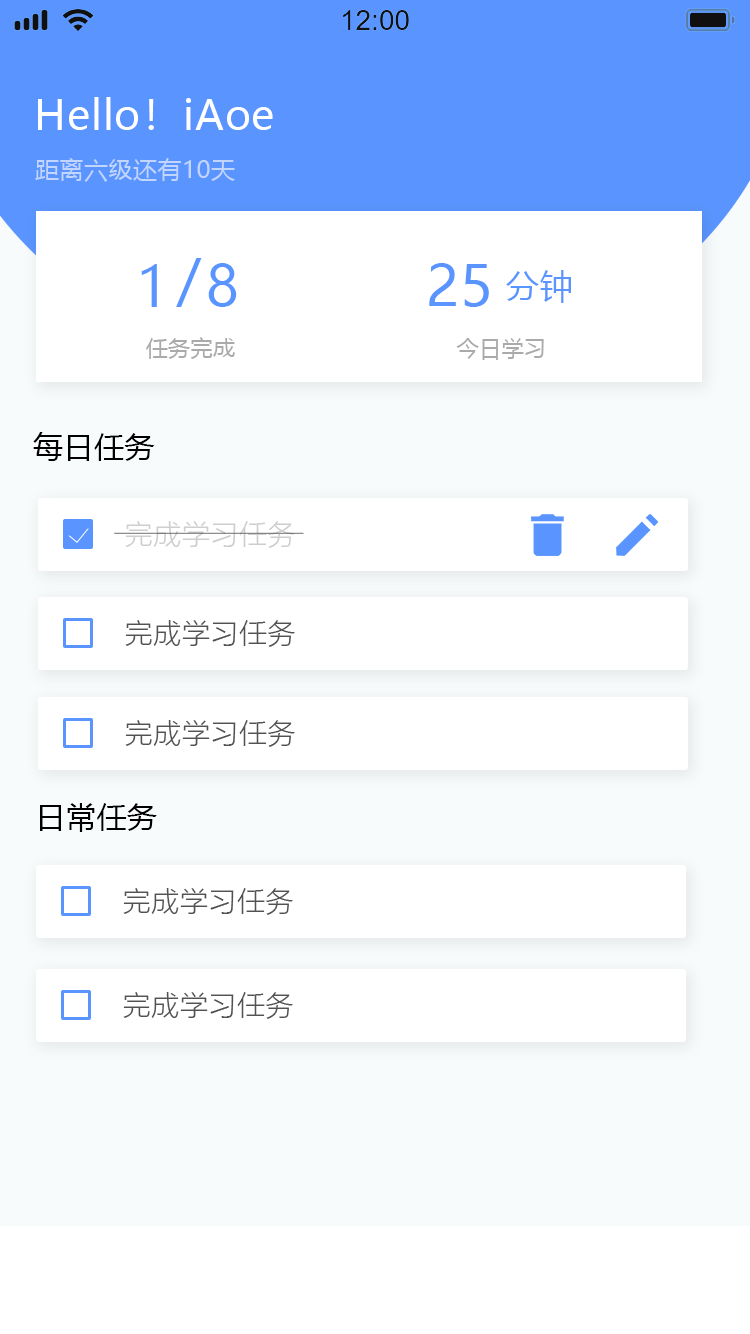
<style>
.page{position:relative;width:750px;height:1334px;background:#ffffff}
.page>*{position:absolute;margin:0}
.t1{font:41px "MicrosoftYaHei";letter-spacing:0.02em;color:#ffffff}
.t2{font:24px "MicrosoftYaHei";letter-spacing:0.02em;color:#c2d5ff}
.t3{font:56px "MicrosoftYaHei";letter-spacing:0.02em;color:#5a95ff}
.t4{font:33px "MicrosoftYaHei";letter-spacing:0.02em;color:#5a95ff}
.t5{font:22px "MicrosoftYaHei";letter-spacing:0.02em;color:#aaaaaa}
.t6{font:30px "MicrosoftYaHei";letter-spacing:0.02em;color:#000000}
.t7{font:28px "MicrosoftYaHeiLight";letter-spacing:0.02em;color:#cecece}
.t8{font:28px "MicrosoftYaHeiLight";letter-spacing:0.02em;color:#525252}
</style>
<div class="page">
<p class="t1" style="left:38px;top:97px;width:235px;height:33px">Hello！iAoe</p>
<p class="t2" style="left:35px;top:158px;width:200px;height:24px">距离六级还有10天</p>
<p class="t3" style="left:141px;top:264px;width:16px;height:43px">1</p>
<p class="t3" style="left:176px;top:258px;width:26px;height:49px">/</p>
<p class="t3" style="left:208px;top:263px;width:29px;height:44px">8</p>
<p class="t3" style="left:429px;top:263px;width:60px;height:44px">25</p>
<p class="t4" style="left:506px;top:270px;width:65px;height:33px">分钟</p>
<p class="t5" style="left:146px;top:337px;width:89px;height:22px">任务完成</p>
<p class="t5" style="left:456px;top:338px;width:88px;height:22px">今日学习</p>
<p class="t6" style="left:33px;top:432px;width:122px;height:29px">每日任务</p>
<p class="t7" style="left:125px;top:521px;width:170px;height:27px">完成学习任务</p>
<p class="t8" style="left:125px;top:620px;width:170px;height:27px">完成学习任务</p>
<p class="t8" style="left:125px;top:720px;width:170px;height:27px">完成学习任务</p>
<p class="t6" style="left:40px;top:803px;width:117px;height:29px">日常任务</p>
<p class="t8" style="left:123px;top:888px;width:170px;height:27px">完成学习任务</p>
<p class="t8" style="left:123px;top:992px;width:170px;height:27px">完成学习任务</p>
</div>
